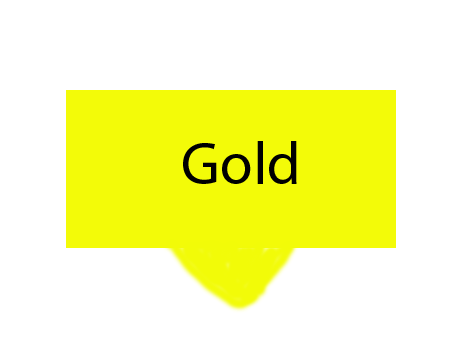
<style>
.page{position:relative;width:454px;height:340px;background:#ffffff}
.page>*{position:absolute;margin:0}
.t1{font:60px "MyriadPro-Regular";color:#000000}
</style>
<div class="page">
<p class="t1" style="left:183px;top:141px;width:114px;height:43px">Gold</p>
</div>
